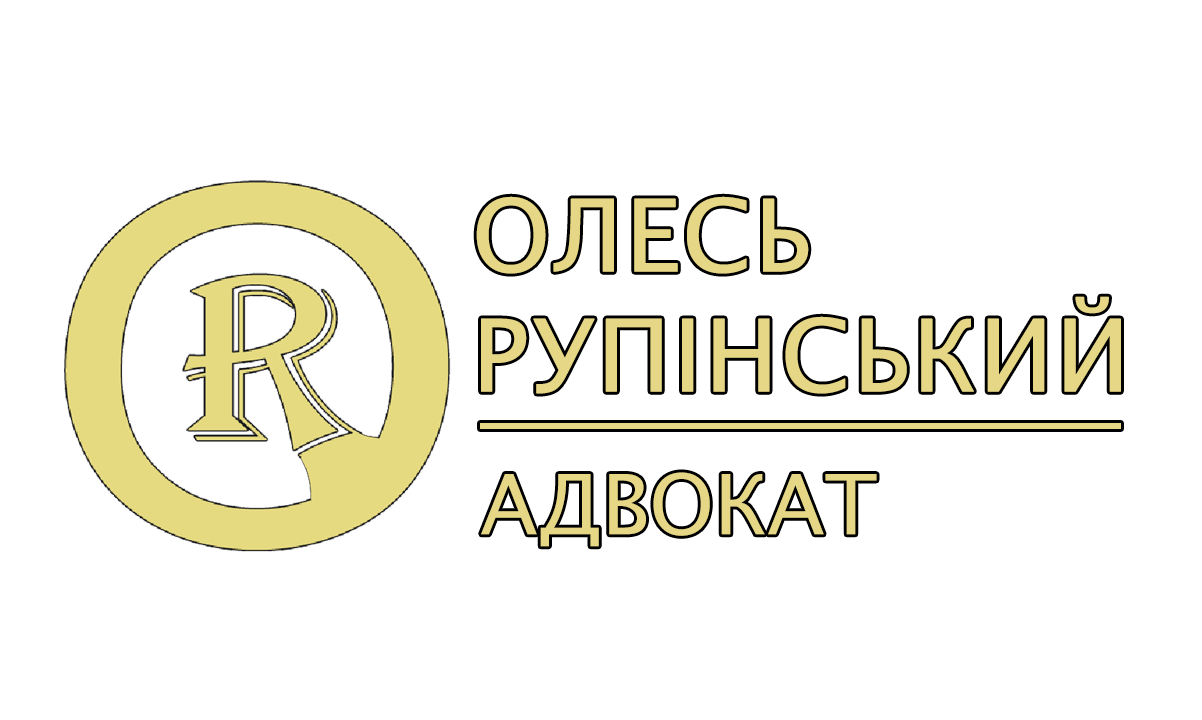
<style>
.page{position:relative;width:1202px;height:720px;background:#ffffff}
.page>*{position:absolute;margin:0}
.t1{font:100px "LucidaSans";color:#e6d786;font-weight:bold}
</style>
<div class="page">
<p class="t1" style="left:476px;top:196px;width:645px;height:198px">ОЛЕСЬ <br>РУПІНСЬКИЙ</p>
</div>
